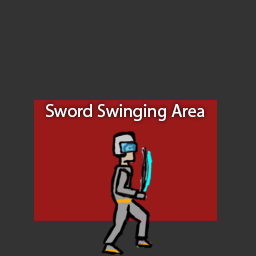
<style>
.page{position:relative;width:256px;height:256px;background:#333333}
.page>*{position:absolute;margin:0}
.t1{font:18px "MyriadPro-Regular";color:#ffffff}
</style>
<div class="page">
<p class="t1" style="left:46px;top:104px;width:159px;height:17px">Sword Swinging Area</p>
</div>
